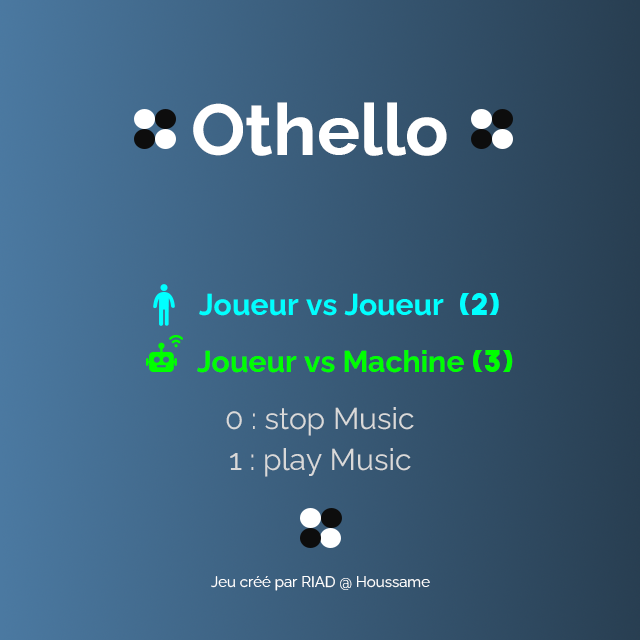
<style>
.page{position:relative;width:640px;height:640px}
.page>*{position:absolute;margin:0}
.t1{font:72px "Raleway-Bold";color:#ffffff}
.t2{font:30px "Raleway-Bold";color:#00ffff}
.t3{font:30px "TheBoldFont";color:#00ffff}
.t4{font:30px "Raleway-Bold";color:#00ff00}
.t5{font:30px "TheBoldFont";color:#00ff00}
.t6{font:30px "Raleway-Regular";color:#d9d9d9}
.t7{font:15px "Raleway-Regular";color:#ffffff}
</style>
<div class="page">
<p class="t1" style="left:193px;top:102px;width:254px;height:54px">Othello</p>
<p class="t2" style="left:199px;top:293px;width:300px;height:23px">Joueur vs Joueur  <span class="t3">(2)</span></p>
<p class="t4" style="left:197px;top:350px;width:316px;height:23px">Joueur vs Machine <span class="t5">(3)</span></p>
<p class="t6" style="left:226px;top:407px;width:188px;height:29px">0 : stop Music</p>
<p class="t6" style="left:230px;top:448px;width:181px;height:29px">1 : play Music</p>
<p class="t7" style="left:211px;top:576px;width:219px;height:15px">Jeu créé par RIAD @ Houssame</p>
</div>
